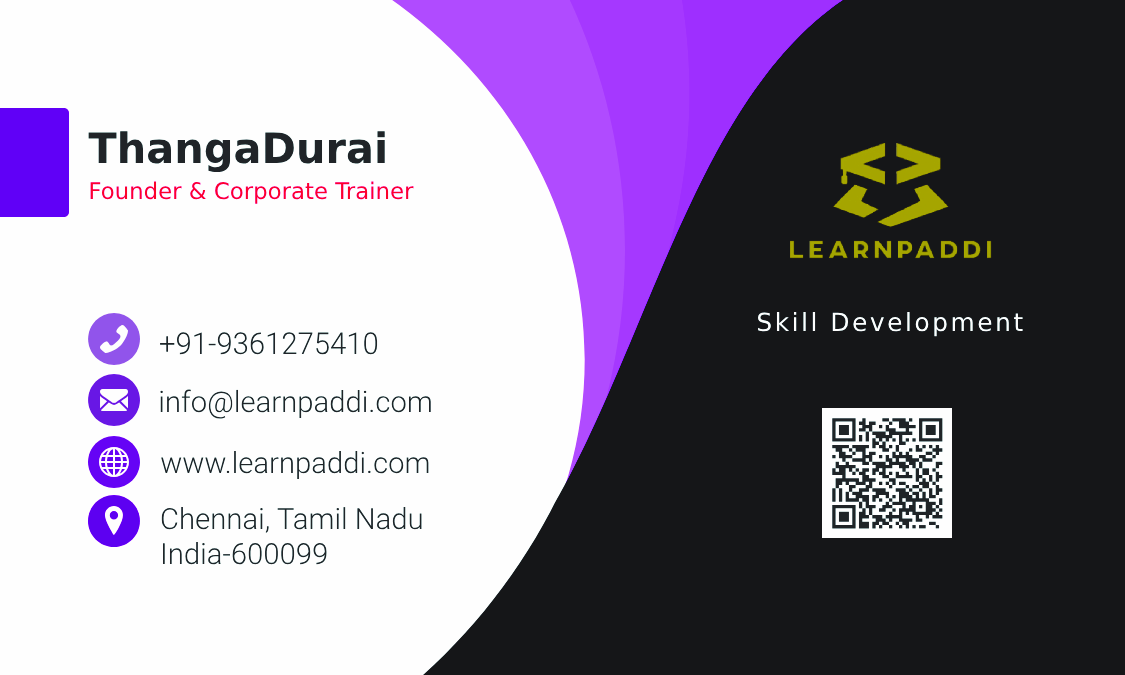
<style>
.page{position:relative;width:1125px;height:675px;background:#fefefe}
.page>*{position:absolute;margin:0}
.t1{font:41.9px "NexaBold";color:#323031}
.t2{font:22.9px "NexaLight";color:#ec1b34}
.t3{font:25px "NexaLight";letter-spacing:0.1em;color:#fefefe}
.t4{font:30.2px "Roboto-Light";color:#323031}
.t5{font:29.5px "Roboto-Light";color:#323031}
.t6{font:29.3px "Roboto-Light";color:#323031}
.t7{font:29.2px "Roboto-Light";color:#323031}
</style>
<div class="page">
<p class="t1" style="left:88px;top:131px;width:297px;height:42px">ThangaDurai</p>
<p class="t2" style="left:90px;top:181px;width:324px;height:23px">Founder &amp; Corporate Trainer</p>
<p class="t3" style="left:758px;top:312px;width:265px;height:25px">Skill Development</p>
<p class="t4" style="left:160px;top:332px;width:218px;height:23px">+91-9361275410</p>
<p class="t5" style="left:160px;top:389px;width:271px;height:30px">info@learnpaddi.com</p>
<p class="t6" style="left:161px;top:451px;width:268px;height:28px">www.learnpaddi.com</p>
<p class="t7" style="left:161px;top:507px;width:261px;height:58px">Chennai, Tamil Nadu<br>India-600099</p>
</div>
